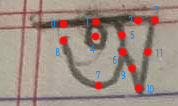
<style>
.page{position:relative;width:178px;height:106px}
.page>*{position:absolute;margin:0}
.t1{font:11.3px "Montserrat-Regular";color:#248bdb;scale:0.57 1}
</style>
<div class="page">
<p class="t1" style="left:154px;top:6px;width:5px;height:8px">3</p>
<p class="t1" style="left:128px;top:16px;width:5px;height:8px">2</p>
<p class="t1" style="left:51px;top:20px;width:5px;height:8px">0</p>
<p class="t1" style="left:86px;top:18px;width:3px;height:8px">1</p>
<p class="t1" style="left:130px;top:31px;width:5px;height:8px">5</p>
<p class="t1" style="left:55px;top:48px;width:5px;height:8px">8</p>
<p class="t1" style="left:90px;top:45px;width:5px;height:8px">4</p>
<p class="t1" style="left:156px;top:49px;width:7px;height:8px">1 1</p>
<p class="t1" style="left:112px;top:56px;width:5px;height:8px">6</p>
<p class="t1" style="left:96px;top:71px;width:4px;height:8px">7</p>
<p class="t1" style="left:121px;top:71px;width:5px;height:8px">9</p>
<p class="t1" style="left:147px;top:85px;width:7px;height:8px">10</p>
</div>
